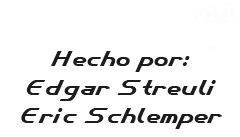
<style>
.page{position:relative;width:240px;height:137px;background:#ffffff}
.page>*{position:absolute;margin:0}
.t1{font:24px "CybertronMetalsNormal";color:#1c1c1c}
</style>
<div class="page">
<p class="t1" style="left:21px;top:51px;width:201px;height:78px;text-align:center">Hecho por:<br>Edgar Streuli<br>Eric Schlemper</p>
</div>
